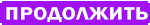
<style>
.page{position:relative;width:150px;height:25px;background:#a012f2}
.page>*{position:absolute;margin:0}
.t1{font:18.1px "FranklinGothic-Demi";letter-spacing:0.03em;color:#ffffff;scale:1.2 1}
</style>
<div class="page">
<p class="t1" style="left:6px;top:7px;width:142px;height:15px">ПРОДОЛЖИТЬ</p>
</div>
